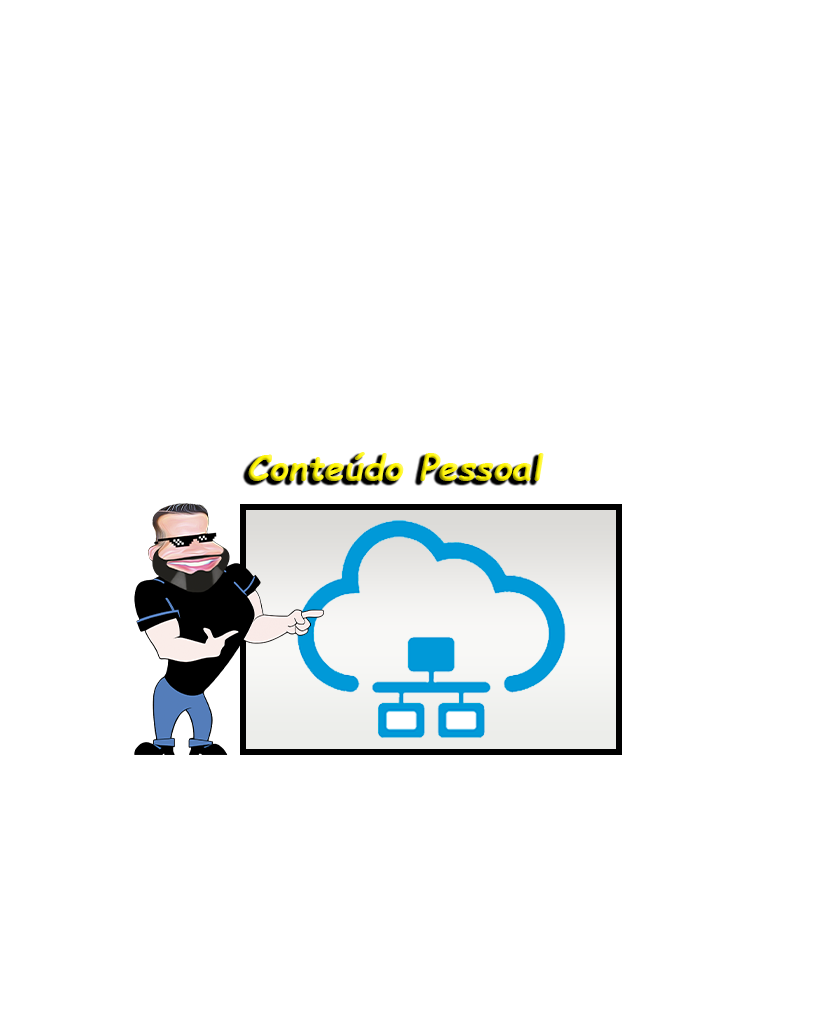
<style>
.page{position:relative;width:829px;height:1014px;background:#ffffff}
.page>*{position:absolute;margin:0}
.t1{font:36px "ComicSansMS-BoldItalic"}
</style>
<div class="page">
<p class="t1" style="left:248px;top:452px;width:296px;height:29px">Conteúdo Pessoal</p>
</div>
